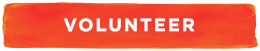
<style>
.page{position:relative;width:260px;height:51px}
.page>*{position:absolute;margin:0}
.t1{font:18px "Gotham-Bold";letter-spacing:0.111em;color:#ffffff}
</style>
<div class="page">
<p class="t1" style="left:63px;top:18px;width:132px;height:14px">VOLUNTEER</p>
</div>
